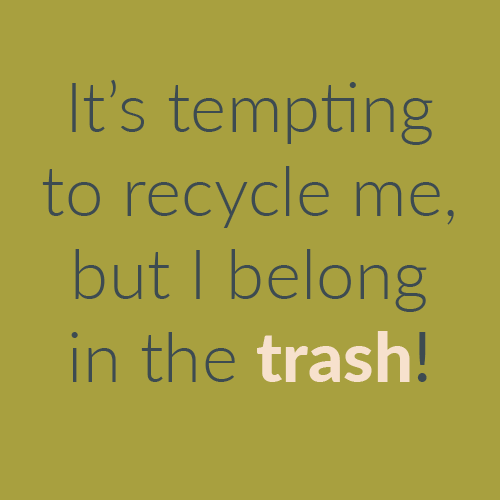
<style>
.page{position:relative;width:500px;height:500px;background:#a8a03f}
.page>*{position:absolute;margin:0}
.t1{font:69.4px "Lato-Light";color:#3d4b51}
.t2{font:69.4px "Lato-Heavy";color:#f7e2cd}
.t3{font:69.4px "Lato-Regular";color:#3d4b51}
</style>
<div class="page">
<p class="t1" style="left:42px;top:79px;width:412px;height:303px;text-align:center">It’s tempting to recycle me, but I belong in the <span class="t2">trash</span><span class="t3">!</span></p>
</div>
